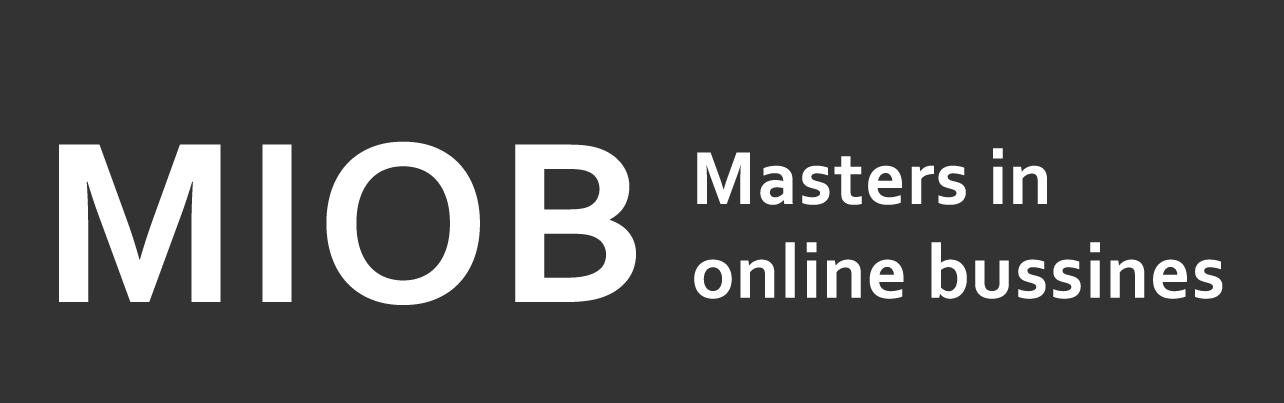
<style>
.page{position:relative;width:1284px;height:403px;background:#333333}
.page>*{position:absolute;margin:0}
.t1{font:240.7px "Corbel-Bold";letter-spacing:0.02em;color:#ffffff}
.t2{font:78.2px "Corbel-Bold";letter-spacing:0.02em;color:#ffffff}
</style>
<div class="page">
<p class="t1" style="left:59px;top:141px;width:577px;height:164px">MIOB</p>
<p class="t2" style="left:694px;top:148px;width:529px;height:151px">Masters in <br>online bussines</p>
</div>
